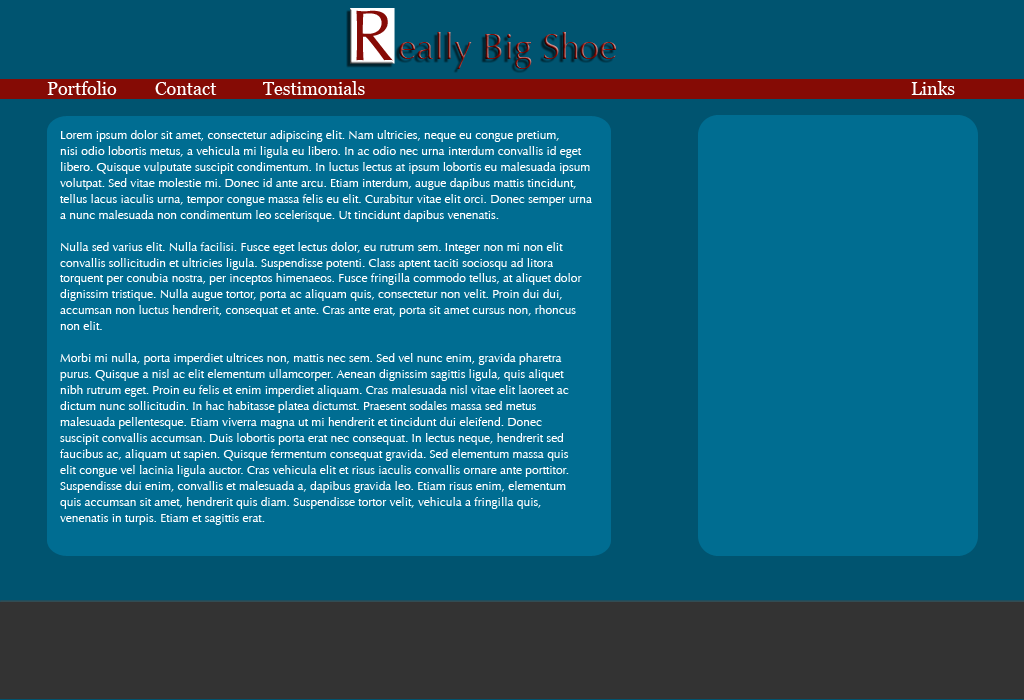
<style>
.page{position:relative;width:1024px;height:700px;background:#005470}
.page>*{position:absolute;margin:0}
.t1{font:71.7px "Optima-Regular";color:#860b06}
.t2{font:35.9px "Optima-Regular"}
.t3{font:17.9px "Georgia";color:#ffffff}
.t4{font:12px/15.9px "Optima-Regular";color:#ffffff}
</style>
<div class="page">
<p class="t1" style="left:356px;top:10px;width:37px;height:51px">R</p>
<p class="t2" style="left:399px;top:32px;width:217px;height:37px">eally Big Shoe</p>
<p class="t3" style="left:47px;top:81px;width:908px;height:14px">Portfolio  Contact  Testimonials                Links</p>
<p class="t4" style="left:60px;top:130px;width:532px;height:395px">Lorem ipsum dolor sit amet, consectetur adipiscing elit. Nam ultricies, neque eu congue pretium, <br>nisi odio lobortis metus, a vehicula mi ligula eu libero. In ac odio nec urna interdum convallis id eget <br>libero. Quisque vulputate suscipit condimentum. In luctus lectus at ipsum lobortis eu malesuada ipsum <br>volutpat. Sed vitae molestie mi. Donec id ante arcu. Etiam interdum, augue dapibus mattis tincidunt,<br>tellus lacus iaculis urna, tempor congue massa felis eu elit. Curabitur vitae elit orci. Donec semper urna <br>a nunc malesuada non condimentum leo scelerisque. Ut tincidunt dapibus venenatis.<br><br>Nulla sed varius elit. Nulla facilisi. Fusce eget lectus dolor, eu rutrum sem. Integer non mi non elit <br>convallis sollicitudin et ultricies ligula. Suspendisse potenti. Class aptent taciti sociosqu ad litora <br>torquent per conubia nostra, per inceptos himenaeos. Fusce fringilla commodo tellus, at aliquet dolor <br>dignissim tristique. Nulla augue tortor, porta ac aliquam quis, consectetur non velit. Proin dui dui, <br>accumsan non luctus hendrerit, consequat et ante. Cras ante erat, porta sit amet cursus non, rhoncus <br>non elit.<br><br>Morbi mi nulla, porta imperdiet ultrices non, mattis nec sem. Sed vel nunc enim, gravida pharetra <br>purus. Quisque a nisl ac elit elementum ullamcorper. Aenean dignissim sagittis ligula, quis aliquet <br>nibh rutrum eget. Proin eu felis et enim imperdiet aliquam. Cras malesuada nisl vitae elit laoreet ac <br>dictum nunc sollicitudin. In hac habitasse platea dictumst. Praesent sodales massa sed metus <br>malesuada pellentesque. Etiam viverra magna ut mi hendrerit et tincidunt dui eleifend. Donec <br>suscipit convallis accumsan. Duis lobortis porta erat nec consequat. In lectus neque, hendrerit sed <br>faucibus ac, aliquam ut sapien. Quisque fermentum consequat gravida. Sed elementum massa quis <br>elit congue vel lacinia ligula auctor. Cras vehicula elit et risus iaculis convallis ornare ante porttitor. <br>Suspendisse dui enim, convallis et malesuada a, dapibus gravida leo. Etiam risus enim, elementum <br>quis accumsan sit amet, hendrerit quis diam. Suspendisse tortor velit, vehicula a fringilla quis, <br>venenatis in turpis. Etiam et sagittis erat.</p>
</div>
